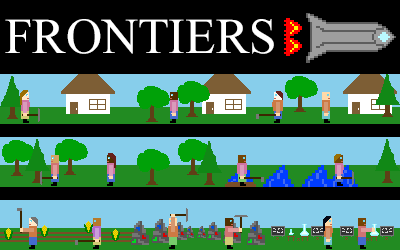
<style>
.page{position:relative;width:400px;height:250px;background:#000000}
.page>*{position:absolute;margin:0}
.t1{font:50px "TimesNewRomanPSMT";color:#ffffff}
</style>
<div class="page">
<p class="t1" style="left:5px;top:19px;width:269px;height:35px">FRONTIERS</p>
</div>
